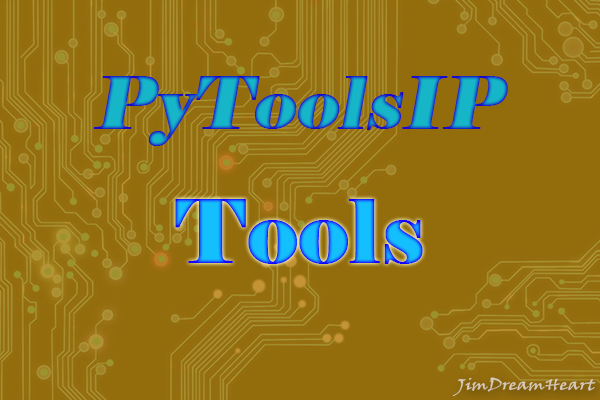
<style>
.page{position:relative;width:600px;height:400px;background:#936d0c}
.page>*{position:absolute;margin:0}
.t1{font:72px "Elephant-Regular";color:#1709c7;font-weight:bold;font-style:italic}
.t2{font:86px "Elephant-Regular";color:#1503fe;font-weight:bold}
</style>
<div class="page">
<p class="t1" style="left:93px;top:76px;width:415px;height:70px">PyToolsIP</p>
<p class="t2" style="left:175px;top:199px;width:248px;height:65px">Tools</p>
</div>
